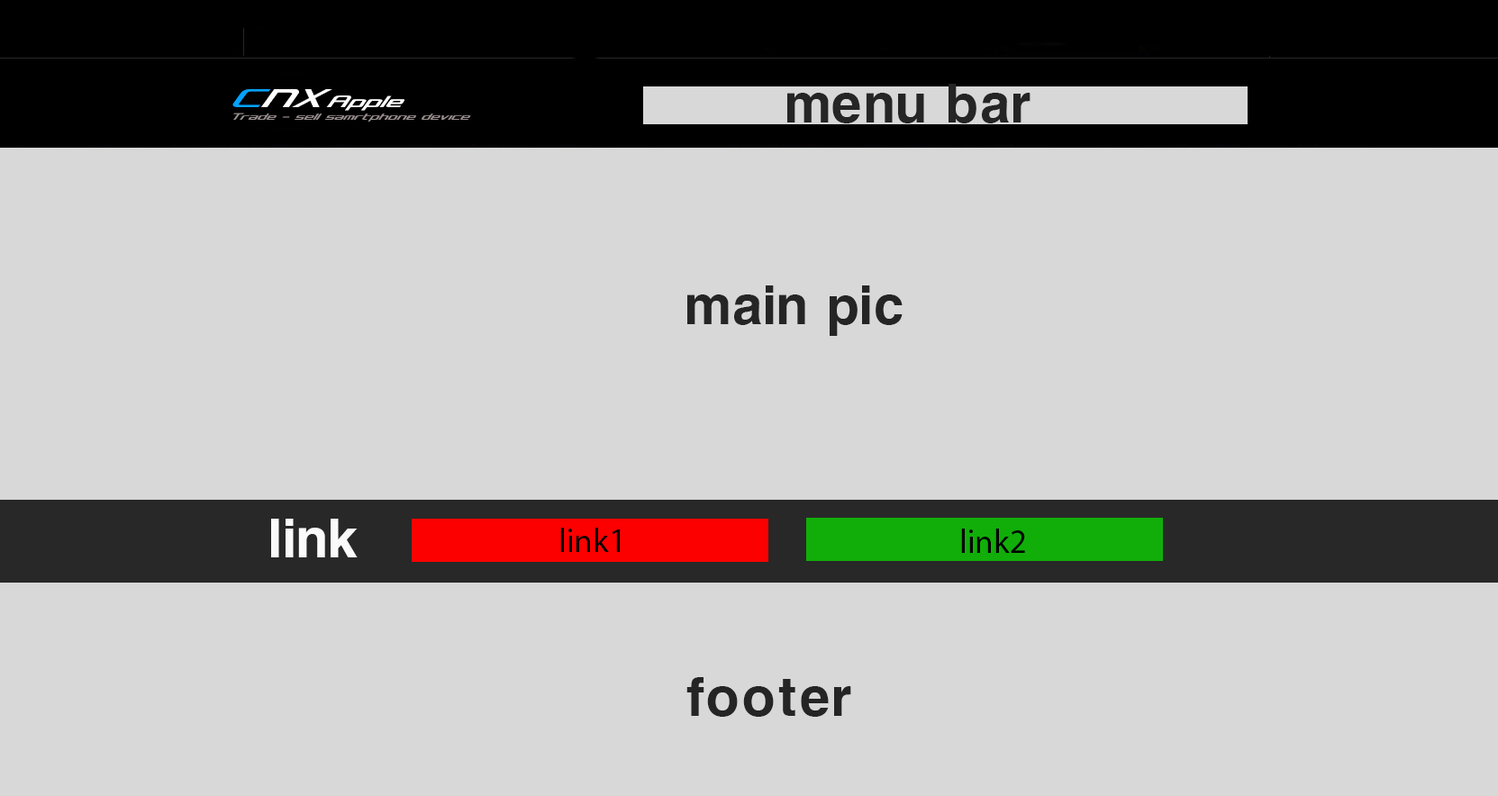
<style>
.page{position:relative;width:1498px;height:796px;background:#d8d8d8}
.page>*{position:absolute;margin:0}
.t1{font:33.6px "Concielian";color:#fffefe}
.t2{font:33.6px "Concielian";color:#04a2fc}
.t3{font:72.1px "SMBxBold";color:#252525}
.t4{font:21.6px "Concielian";color:#fffefe}
.t5{font:12px "Concielian";color:#9a8f8f}
.t6{font:72.1px "SMBxBold";color:#fbfafa}
.t7{font:33.6px "MyriadPro-Regular";color:#000000}
</style>
<div class="page">
<p class="t1" style="left:232px;top:89px;width:100px;height:18px"><span class="t2">C</span>NX</p>
<p class="t3" style="left:787px;top:84px;width:243px;height:39px">menu bar</p>
<p class="t4" style="left:326px;top:95px;width:78px;height:16px">Apple</p>
<p class="t5" style="left:233px;top:113px;width:238px;height:9px">Trade - sell samrtphone device</p>
<p class="t3" style="left:687px;top:285px;width:215px;height:51px">main pic</p>
<p class="t6" style="left:271px;top:519px;width:87px;height:38px">link</p>
<p class="t7" style="left:560px;top:528px;width:60px;height:24px">link1</p>
<p class="t7" style="left:961px;top:529px;width:64px;height:24px">link2</p>
<p class="t3" style="left:686px;top:677px;width:165px;height:40px">footer</p>
</div>
